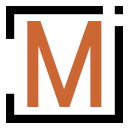
<style>
.page{position:relative;width:128px;height:128px;background:#ffffff}
.page>*{position:absolute;margin:0}
.t1{font:109.7px "BanglaSangamMN-Bold";letter-spacing:-0.025em;color:#cc6633;scale:0.93 1}
</style>
<div class="page">
<p class="t1" style="left:27px;top:21px;width:75px;height:86px">M</p>
</div>
